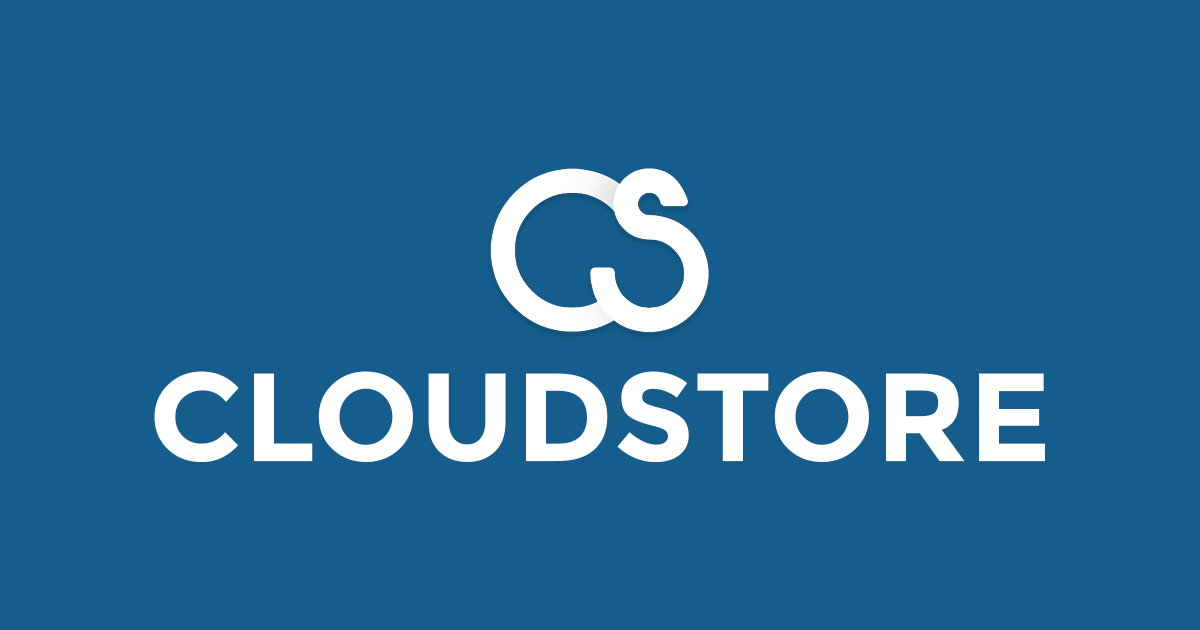
<style>
.page{position:relative;width:1200px;height:630px;background:#155d8c}
.page>*{position:absolute;margin:0}
.t1{font:125.4px "Montserrat-Bold";color:#ffffff}
</style>
<div class="page">
<p class="t1" style="left:154px;top:371px;width:891px;height:91px">CLOUDSTORE</p>
</div>
